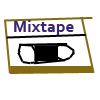
<style>
.page{position:relative;width:100px;height:100px;background:#ffffff}
.page>*{position:absolute;margin:0}
.t1{font:17.3px "Corbel-Bold";color:#3c2570}
</style>
<div class="page">
<p class="t1" style="left:14px;top:20px;width:60px;height:15px">Mixtape</p>
</div>
